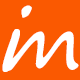
<style>
.page{position:relative;width:80px;height:80px;background:#fa5901}
.page>*{position:absolute;margin:0}
.t1{font:80px "SegoePrint";color:#ffffff;font-style:italic}
</style>
<div class="page">
<p class="t1" style="left:2px;top:5px;width:30px;height:67px">i</p>
<p class="t1" style="left:4px;top:29px;width:75px;height:43px">m</p>
</div>
